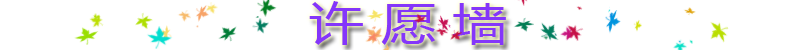
<style>
.page{position:relative;width:800px;height:50px;background:#ffffff}
.page>*{position:absolute;margin:0}
.t1{font:44px "MicrosoftYaHei";color:#8436fa;scale:1.25 1}
</style>
<div class="page">
<p class="t1" style="left:309px;top:1px;width:197px;height:44px">许 愿 墙</p>
</div>
